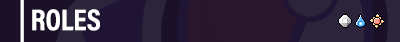
<style>
.page{position:relative;width:400px;height:42px;background:#2c243a}
.page>*{position:absolute;margin:0}
.t1{font:30px "AcuminProCond-Bold";color:#ffffff;text-transform:uppercase}
</style>
<div class="page">
<p class="t1" style="left:32px;top:9px;width:68px;height:22px">Roles</p>
</div>
